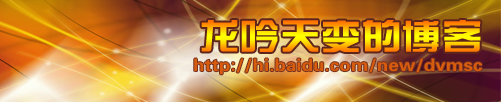
<style>
.page{position:relative;width:501px;height:102px}
.page>*{position:absolute;margin:0}
.t1{font:35.8px "FZZYJW--GB1-0";scale:1.13 1}
.t2{font:17.2px "FZZYJW--GB1-0";color:#d75c0e;scale:1.09 1}
</style>
<div class="page">
<p class="t1" style="left:201px;top:20px;width:280px;height:33px">龙吟天变的博客</p>
<p class="t2" style="left:194px;top:58px;width:288px;height:17px">http://hi.baidu.com/new/dvmsc</p>
</div>
